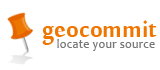
<style>
.page{position:relative;width:160px;height:70px;background:#ffffff}
.page>*{position:absolute;margin:0}
.t1{font:36px "MoolBoran";color:#ef7600}
.t2{font:12px "Candara";letter-spacing:0.025em;color:#777777}
</style>
<div class="page">
<p class="t1" style="left:42px;top:20px;width:115px;height:25px">geocommit</p>
<p class="t2" style="left:57px;top:39px;width:98px;height:12px">locate your source</p>
</div>
